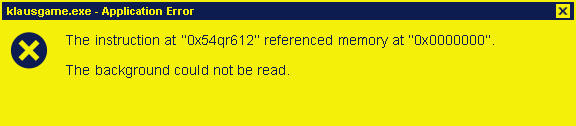
<style>
.page{position:relative;width:576px;height:126px;background:#f5f009}
.page>*{position:absolute;margin:0}
.t1{font:11px "Arial-BoldMT";letter-spacing:0.005em;color:#f5f009}
.t2{font:14px "ArialMT";letter-spacing:0.005em;color:#0c1b50}
</style>
<div class="page">
<p class="t1" style="left:7px;top:7px;width:187px;height:10px">klausgame.exe - Application Error</p>
<p class="t2" style="left:66px;top:35px;width:428px;height:43px">The instruction at ‘’0x54qr612’’ referenced memory at ‘’0x0000000’’. <br><br>The background could not be read.</p>
</div>
